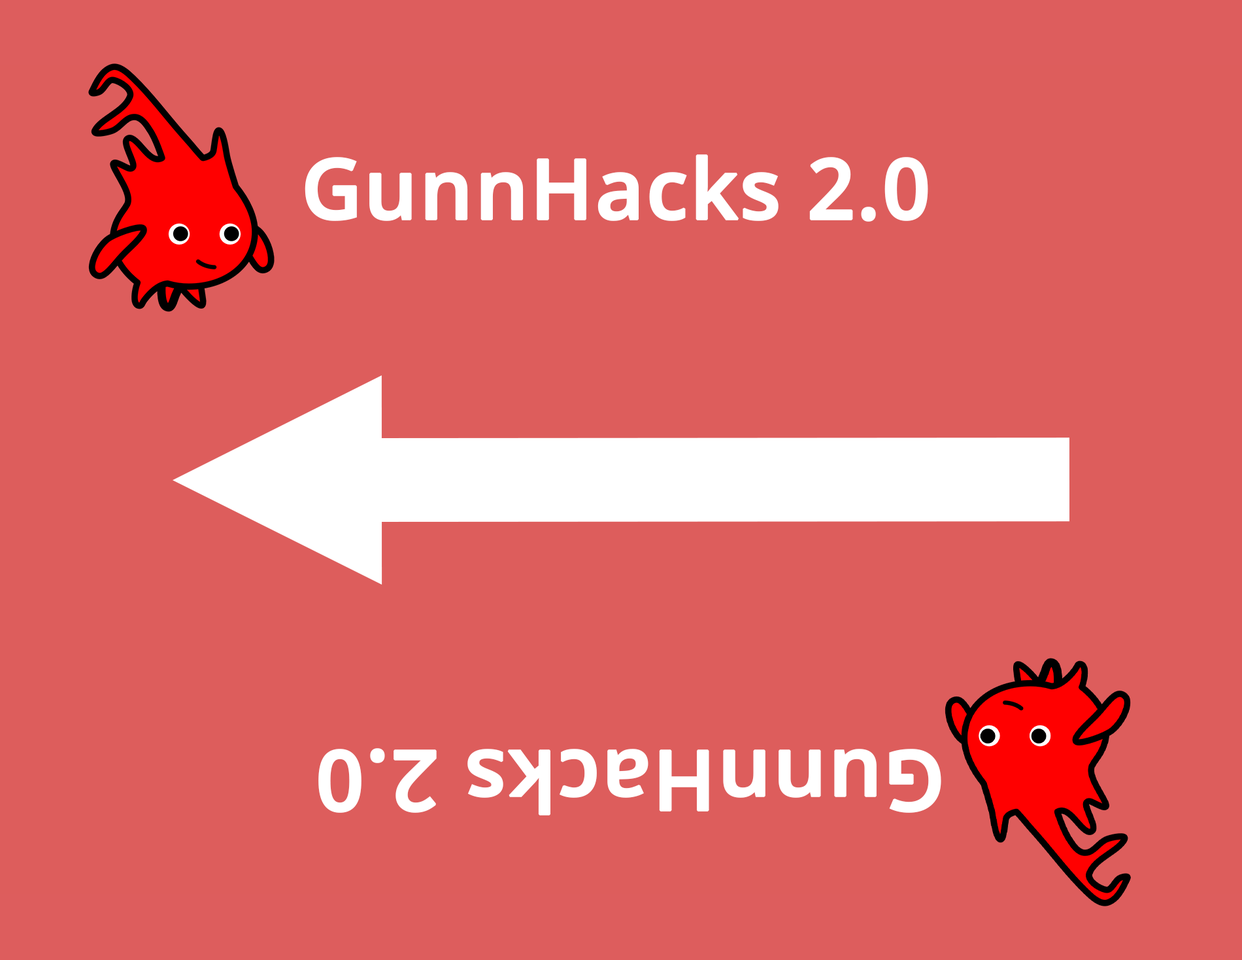
<style>
.page{position:relative;width:1242px;height:960px;background:#dd5d5c}
.page>*{position:absolute;margin:0}
.t1{font:83.7px "OpenSans-Semibold";color:#ffffff;font-weight:bold}
</style>
<div class="page">
<p class="t1" style="left:305px;top:154px;width:623px;height:68px">GunnHacks 2.0</p>
<p class="t1" style="left:318px;top:748px;width:624px;height:67px;rotate:-180deg">GunnHacks 2.0</p>
</div>
